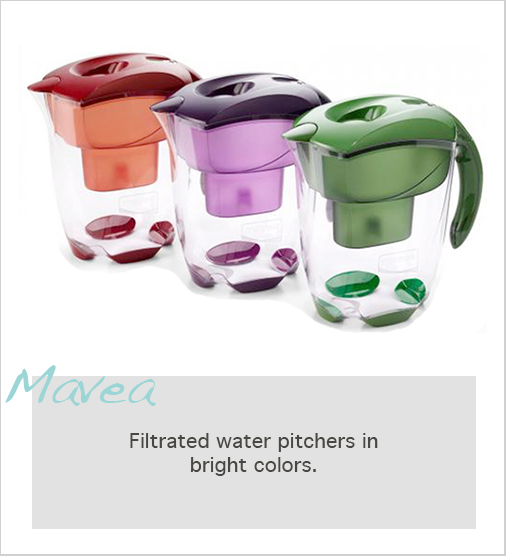
<style>
.page{position:relative;width:506px;height:556px;background:#ffffff}
.page>*{position:absolute;margin:0}
.t1{font:56px "Handwriting-Dakota";color:#9bd5d5}
.t2{font:20px "Geneva";color:#484743}
</style>
<div class="page">
<p class="t1" style="left:5px;top:365px;width:152px;height:41px">Mavea</p>
<p class="t2" style="left:130px;top:433px;width:248px;height:43px;text-align:center">Filtrated water pitchers in <br>bright colors.</p>
</div>
